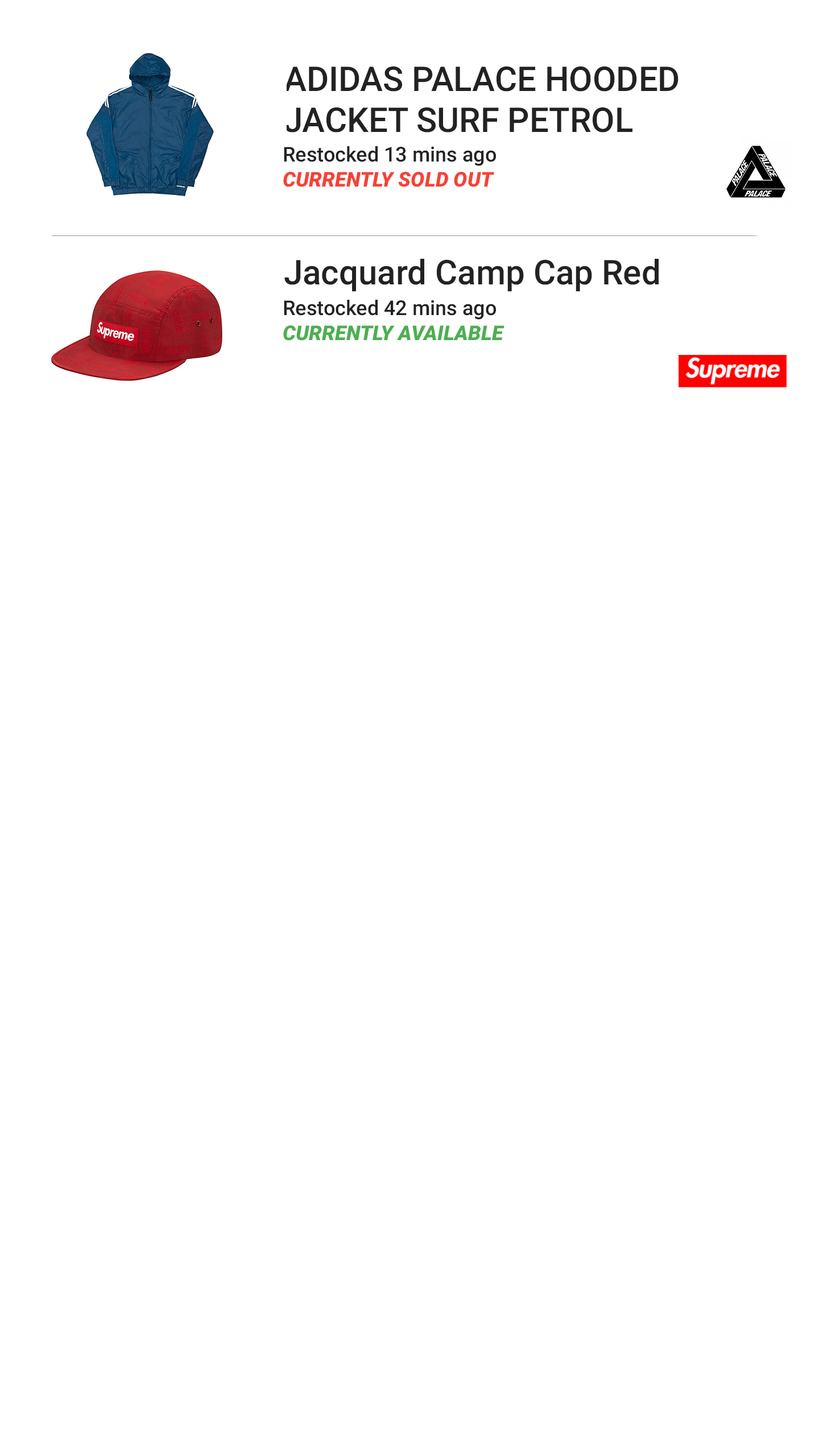
<style>
.page{position:relative;width:819px;height:1456px;background:#ffffff}
.page>*{position:absolute;margin:0}
.t1{font:34.1px "Roboto-Medium";color:#222222}
.t2{font:20.5px "Roboto-Medium";color:#222222}
.t3{font:20.5px "Roboto-Italic";color:#f44336}
.t4{font:20.5px "Roboto-Italic";color:#4caf50}
</style>
<div class="page">
<p class="t1" style="left:284px;top:66px;width:395px;height:67px">ADIDAS PALACE HOODED<br>JACKET SURF PETROL</p>
<p class="t2" style="left:283px;top:146px;width:213px;height:41px">Restocked 13 mins ago<br><span class="t3">CURRENTLY SOLD OUT</span></p>
<p class="t1" style="left:284px;top:259px;width:375px;height:33px">Jacquard Camp Cap Red</p>
<p class="t2" style="left:283px;top:300px;width:221px;height:41px">Restocked 42 mins ago<br><span class="t4">CURRENTLY AVAILABLE</span></p>
</div>
